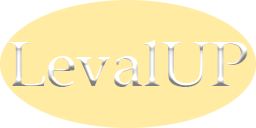
<style>
.page{position:relative;width:256px;height:128px;background:#ffeca2}
.page>*{position:absolute;margin:0}
.t1{font:62.5px "BookAntiqua"}
</style>
<div class="page">
<p class="t1" style="left:9px;top:40px;width:239px;height:47px">LevalUP</p>
</div>
